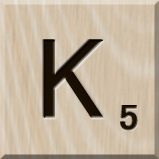
<style>
.page{position:relative;width:159px;height:159px}
.page>*{position:absolute;margin:0}
.t1{font:116px "MS-UIGothic";color:#180e01}
.t2{font:36px "MS-UIGothic";color:#1c1101;font-weight:bold;scale:1.1 1}
</style>
<div class="page">
<p class="t1" style="left:43px;top:40px;width:61px;height:78px">K</p>
<p class="t2" style="left:120px;top:105px;width:18px;height:26px">5</p>
</div>
